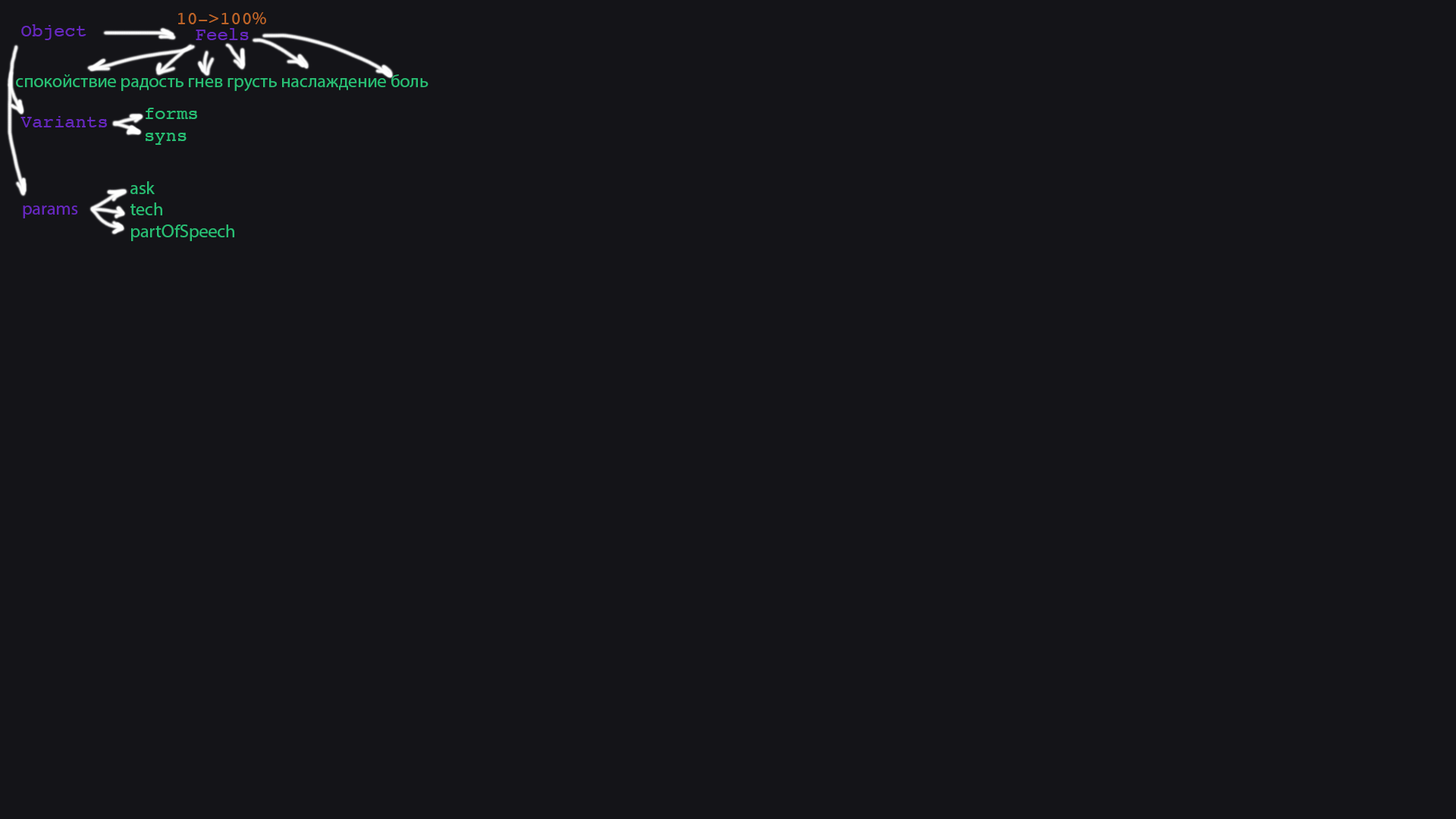
<style>
.page{position:relative;width:1456px;height:819px;background:#141418}
.page>*{position:absolute;margin:0}
.t1{font:18.2px "Courier";color:#bf6528}
.t2{font:18.2px "MyriadPro-Regular";color:#bf6528}
.t3{font:18.2px "Courier";color:#6728bf}
.t4{font:18.2px "MyriadPro-Regular";color:#28bf74}
.t5{font:18.2px "Courier";color:#28bf74}
.t6{font:18.2px "MyriadPro-Regular";color:#6728bf}
</style>
<div class="page">
<p class="t1" style="left:178px;top:12px;width:88px;height:12px">10-&gt;100<span class="t2">%</span></p>
<p class="t3" style="left:21px;top:24px;width:65px;height:16px">Object</p>
<p class="t3" style="left:196px;top:28px;width:53px;height:12px">Feels</p>
<p class="t4" style="left:16px;top:74px;width:412px;height:17px">спокойствие радость гнев грусть наслаждение боль</p>
<p class="t5" style="left:146px;top:108px;width:51px;height:37px">forms<br>syns</p>
<p class="t3" style="left:20px;top:116px;width:87px;height:11px">Variants</p>
<p class="t4" style="left:130px;top:181px;width:104px;height:60px">ask<br>tech<br>partOfSpeech</p>
<p class="t6" style="left:23px;top:206px;width:55px;height:12px">params</p>
</div>
